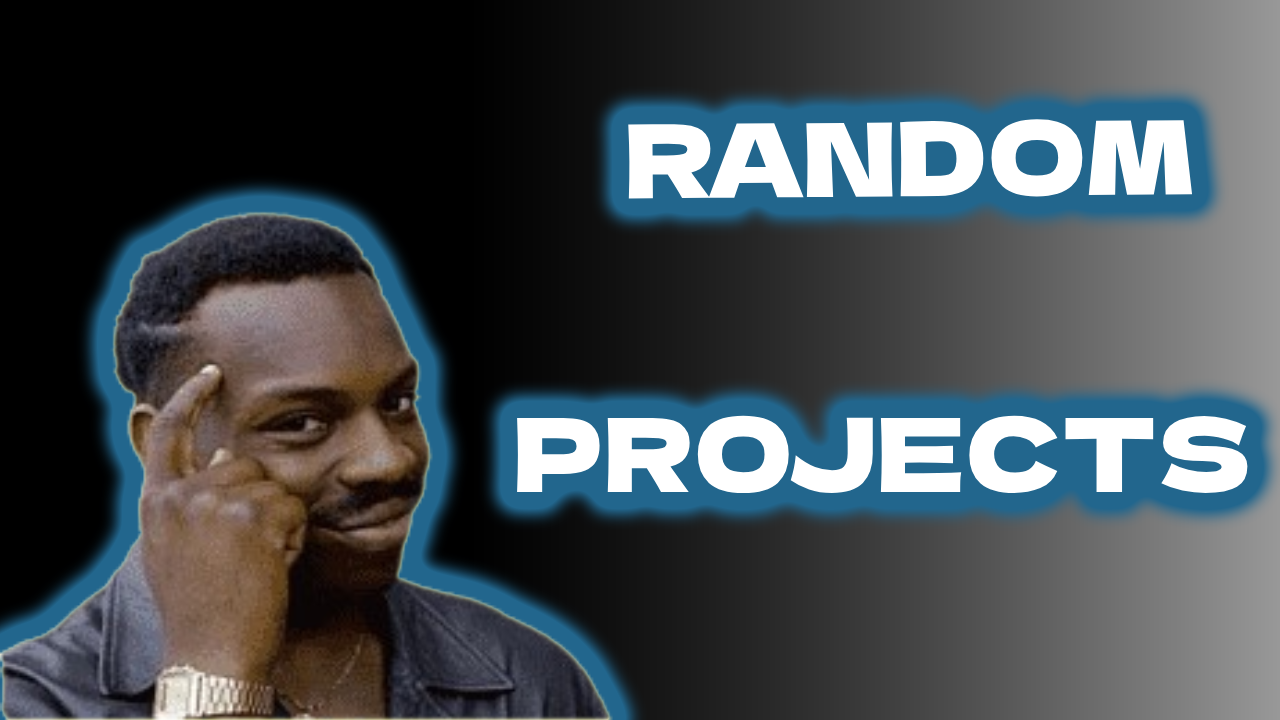
<style>
.page{position:relative;width:1280px;height:720px}
.page>*{position:absolute;margin:0}
.t1{font:102px "DelaGothicOne-Regular";color:#ffffff}
</style>
<div class="page">
<p class="t1" style="left:628px;top:118px;width:565px;height:81px">RANDOM</p>
<p class="t1" style="left:517px;top:415px;width:731px;height:79px">PROJECTS</p>
</div>
